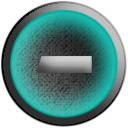
<style>
.page{position:relative;width:128px;height:128px;background:#ffffff}
.page>*{position:absolute;margin:0}
.t1{font:113.8px "UTM-Akashi";letter-spacing:0.05em}
</style>
<div class="page">
<p class="t1" style="left:36px;top:56px;width:56px;height:17px">-</p>
</div>
